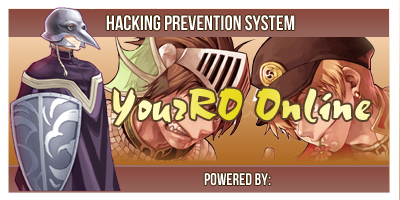
<style>
.page{position:relative;width:400px;height:200px}
.page>*{position:absolute;margin:0}
.t1{font:20.8px "BebasNeue";color:#ffffff}
.t2{font:45.8px "Chokko"}
.t3{font:16.7px "BebasNeue";color:#ffffff}
</style>
<div class="page">
<p class="t1" style="left:106px;top:15px;width:189px;height:16px">Hacking Prevention System</p>
<p class="t2" style="left:113px;top:88px;width:258px;height:38px">YourRO Online</p>
<p class="t3" style="left:204px;top:173px;width:67px;height:13px">Powered BY:</p>
</div>
